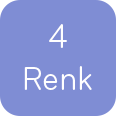
<style>
.page{position:relative;width:116px;height:116px;background:#7f8dd4}
.page>*{position:absolute;margin:0}
.t1{font:35px "Bryant-RegularCondensed";color:#ffffff}
</style>
<div class="page">
<p class="t1" style="left:24px;top:24px;width:68px;height:66px;text-align:center">4<br>Renk</p>
</div>
